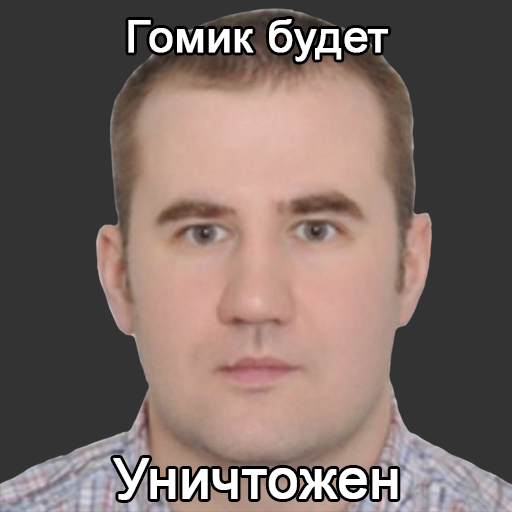
<style>
.page{position:relative;width:512px;height:512px;background:#333333}
.page>*{position:absolute;margin:0}
.t1{font:45px "ArialMT";color:#ffffff;font-weight:bold}
.t2{font:55px "ArialMT";color:#ffffff;font-weight:bold}
</style>
<div class="page">
<p class="t1" style="left:128px;top:19px;width:260px;height:43px">Гомик будет</p>
<p class="t2" style="left:113px;top:458px;width:285px;height:42px">Уничтожен</p>
</div>
